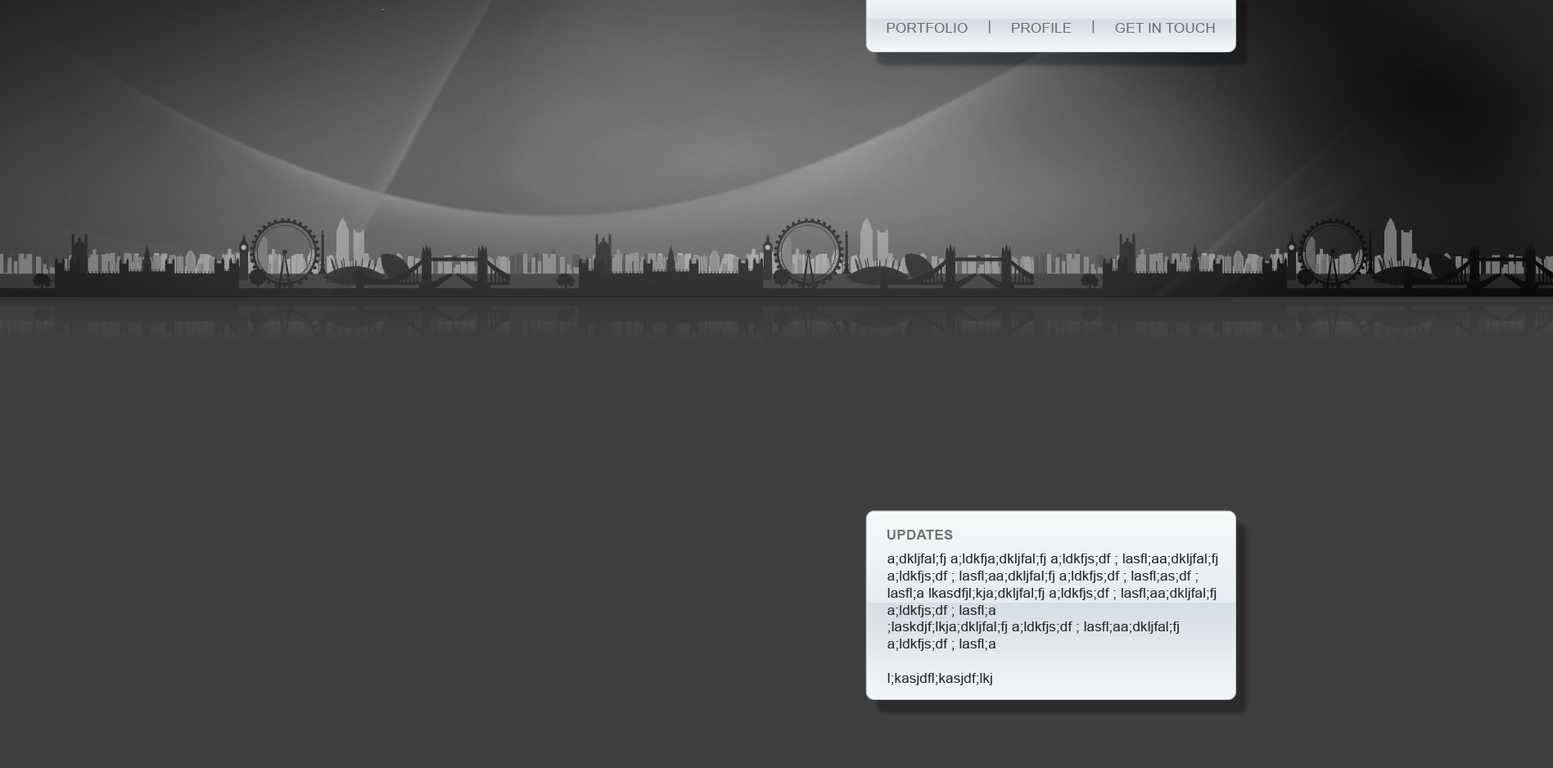
<style>
.page{position:relative;width:1553px;height:768px;background:#403e3e}
.page>*{position:absolute;margin:0}
.t1{font:14.2px "ArialMT";color:#737172}
.t2{font:14.2px "Arial-BoldMT";color:#737172}
.t3{font:14.2px "ArialMT";color:#272626}
</style>
<div class="page">
<p class="t1" style="left:887px;top:20px;width:328px;height:14px">PORTFOLIO     |     PROFILE     |     GET IN TOUCH</p>
<p class="t2" style="left:887px;top:530px;width:66px;height:9px">UPDATES</p>
<p class="t3" style="left:887px;top:553px;width:331px;height:132px">a;dkljfal;fj a;ldkfja;dkljfal;fj a;ldkfjs;df ; lasfl;aa;dkljfal;fj a;ldkfjs;df ; lasfl;aa;dkljfal;fj a;ldkfjs;df ; lasfl;as;df ; lasfl;a lkasdfjl;kja;dkljfal;fj a;ldkfjs;df ; lasfl;aa;dkljfal;fj a;ldkfjs;df ; lasfl;a<br>;laskdjf;lkja;dkljfal;fj a;ldkfjs;df ; lasfl;aa;dkljfal;fj a;ldkfjs;df ; lasfl;a<br><br>l;kasjdfl;kasjdf;lkj</p>
</div>
